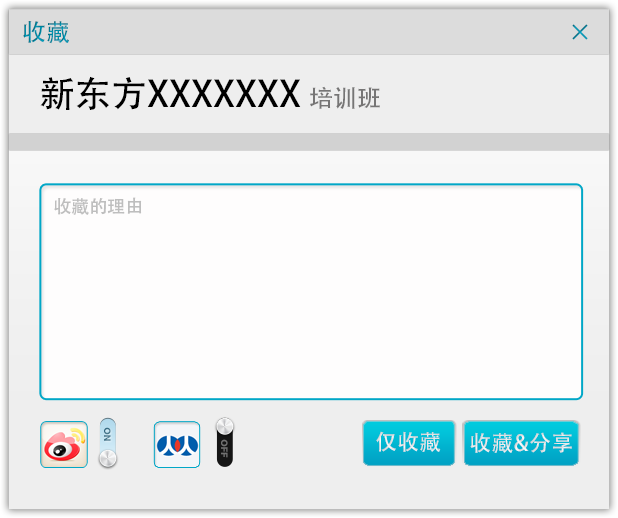
<style>
.page{position:relative;width:618px;height:518px;background:#fefdfd}
.page>*{position:absolute;margin:0}
.t1{font:24px "AdobeHeitiStd-Regular";color:#0189a3}
.t2{font:24px "AdobeHeitiStd-Regular"}
.t3{font:36px "AdobeHeitiStd-Regular";color:#000000}
.t4{font:24px "AdobeHeitiStd-Regular";color:#767575}
.t5{font:18px "AdobeHeitiStd-Regular";color:#bebebe}
.t6{font:9px "HelveticaNeueLTCom-Hv";letter-spacing:0.01em;color:#44768c;text-transform:uppercase}
.t7{font:22px "AdobeHeitiStd-Regular";letter-spacing:0.01em;color:#e8e8e9;text-transform:uppercase}
.t8{font:22px "AdobeHeitiStd-Regular";letter-spacing:0.01em;color:#e6e6e7;text-transform:uppercase}
.t9{font:9px "HelveticaNeueLTCom-Hv";letter-spacing:0.01em;color:#717171;text-transform:uppercase}
</style>
<div class="page">
<p class="t1" style="left:23px;top:21px;width:46px;height:23px">收藏</p>
<p class="t2" style="left:572px;top:24px;width:16px;height:16px">×</p>
<p class="t2" style="left:572px;top:24px;width:16px;height:16px">×</p>
<p class="t3" style="left:40px;top:76px;width:340px;height:34px">新东方XXXXXXX <span class="t4">培训班</span></p>
<p class="t5" style="left:54px;top:197px;width:88px;height:18px">收藏的理由</p>
<p class="t6" style="left:104px;top:427px;width:7px;height:14px;rotate:90deg">ON</p>
<p class="t7" style="left:376px;top:431px;width:65px;height:21px">仅收藏</p>
<p class="t8" style="left:470px;top:432px;width:102px;height:21px">收藏&amp;分享</p>
<p class="t9" style="left:221px;top:439px;width:7px;height:19px;rotate:90deg">OFF</p>
</div>
